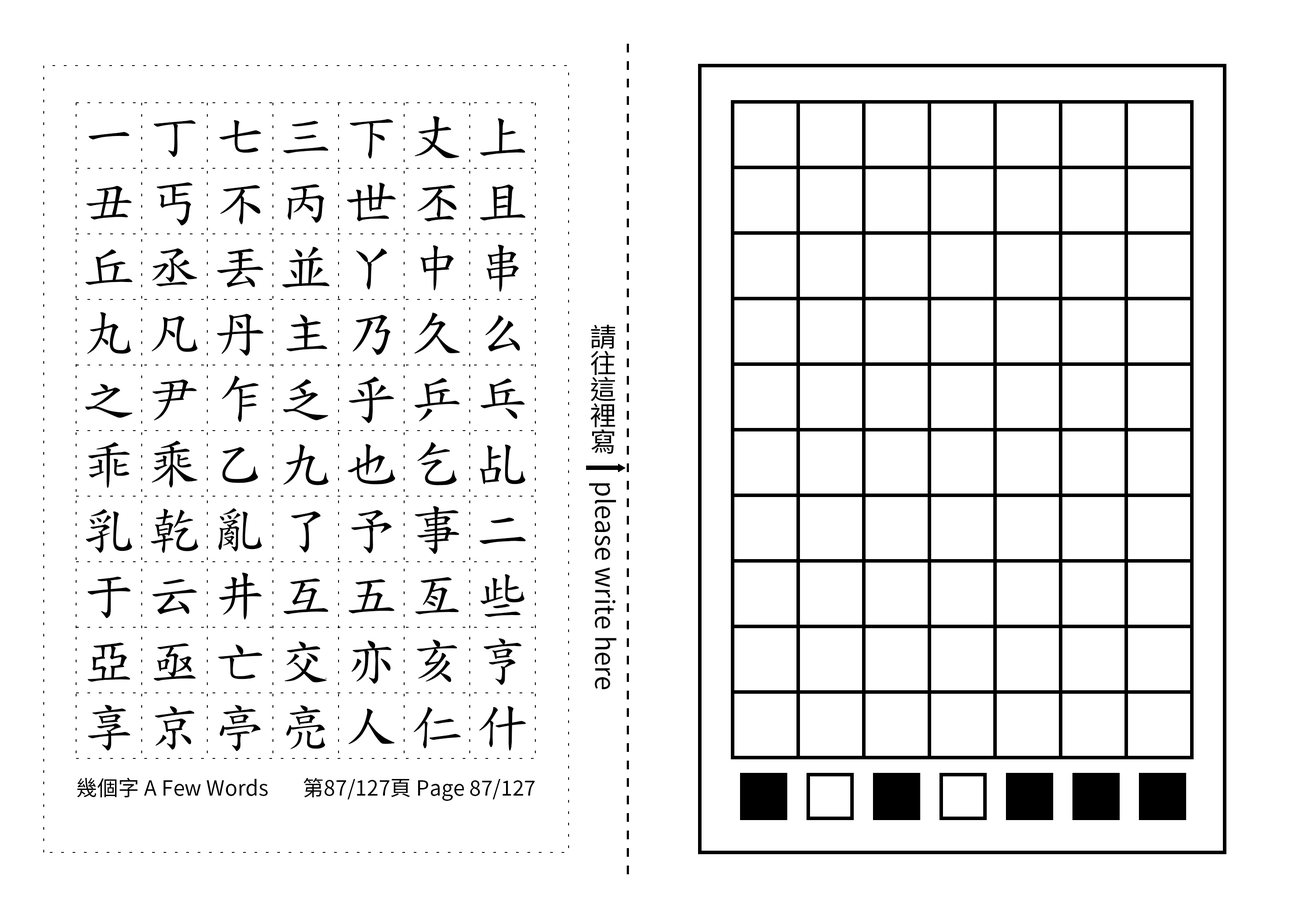
<style>
.page{position:relative;width:1299px;height:918px;background:#ffffff}
.page>*{position:absolute;margin:0}
.t1{font:52.5px/65.6px "TW-Kai-98_1";letter-spacing:0.25em;color:#000000}
.t2{font:26.2px "SourceHanSansTC-Regular";color:#000000}
.t3{font:21px "SourceHanSansTC-Regular";color:#000000}
</style>
<div class="page">
<p class="t1" style="left:85px;top:116px;width:441px;height:636px;text-align:center">一丁七三下丈上丑丐不丙世丕且丘丞丟並丫中串丸凡丹主乃久么之尹乍乏乎乒乓乖乘乙九也乞乩乳乾亂了予事二于云井互五亙些亞亟亡交亦亥亨享京亭亮人仁什</p>
<p class="t2" style="left:589px;top:324px;width:28px;height:366px;text-align:center">請往這裡寫　please write here</p>
<p class="t3" style="left:77px;top:778px;width:191px;height:20px">幾個字 A Few Words</p>
<p class="t3" style="left:303px;top:778px;width:232px;height:23px">第87/127頁 Page 87/127</p>
</div>
